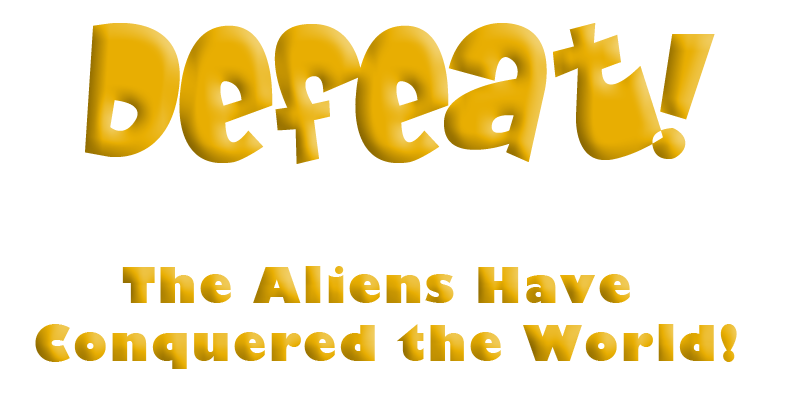
<style>
.page{position:relative;width:800px;height:400px;background:#ffffff}
.page>*{position:absolute;margin:0}
.t1{font:169px "BabyKruffy";letter-spacing:0.05em}
.t2{font:48px "GillSans-UltraBold";letter-spacing:0.05em}
</style>
<div class="page">
<p class="t1" style="left:85px;top:23px;width:630px;height:141px">Defeat!</p>
<p class="t2" style="left:35px;top:266px;width:702px;height:103px;text-align:center">The Aliens Have <br>Conquered the World!</p>
</div>
